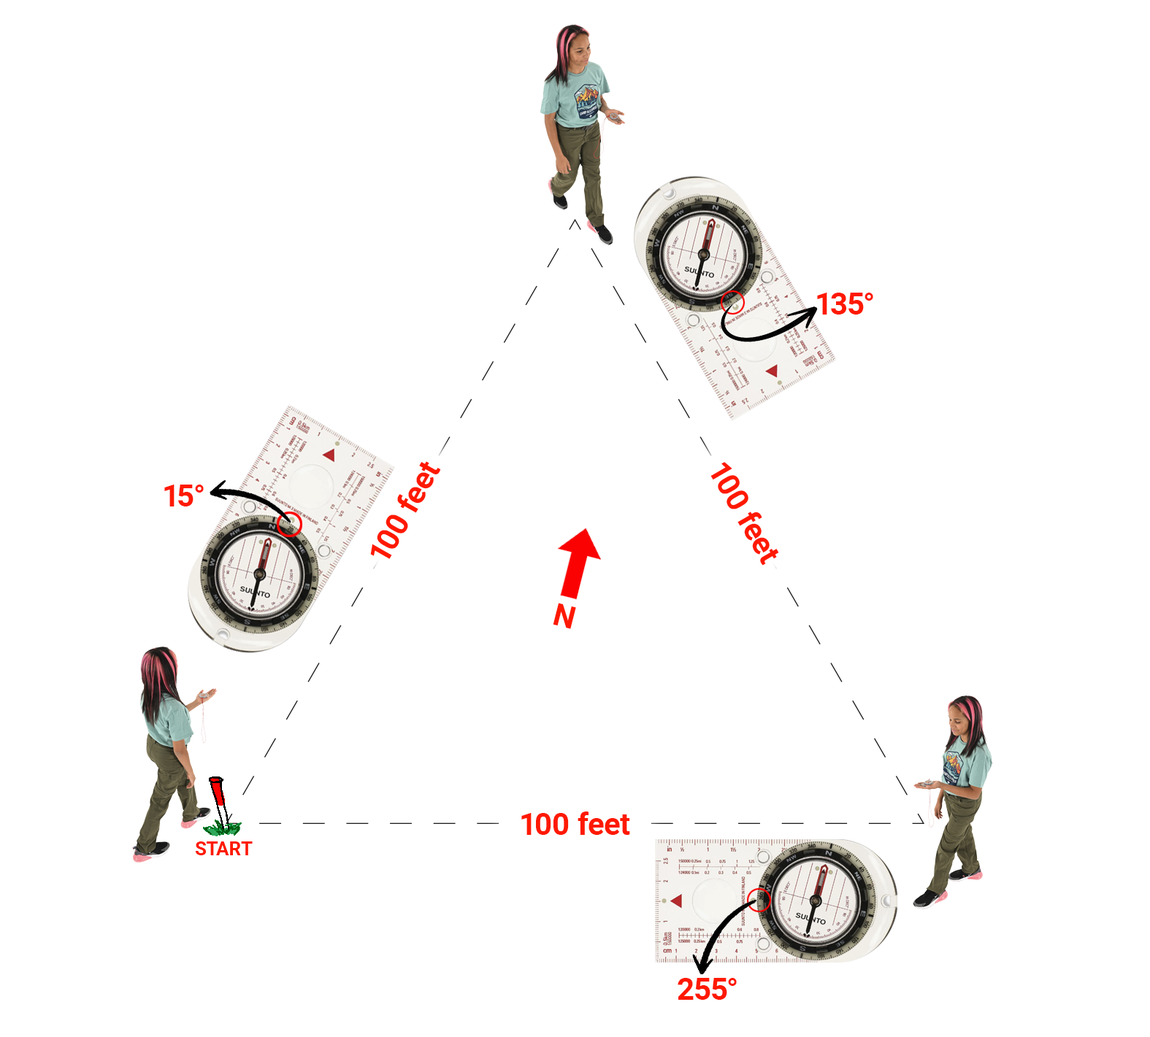
<style>
.page{position:relative;width:1150px;height:1037px;background:#ffffff}
.page>*{position:absolute;margin:0}
.t1{font:30.8px "Roboto-Bold";color:#ff1900}
.t2{font:18.8px "Roboto-Bold";color:#ff1900}
</style>
<div class="page">
<p class="t1" style="left:817px;top:293px;width:56px;height:22px">135°</p>
<p class="t1" style="left:370px;top:461px;width:71px;height:98px;rotate:-60deg">100 feet</p>
<p class="t1" style="left:710px;top:462px;width:69px;height:104px;rotate:60deg">100 feet</p>
<p class="t1" style="left:164px;top:485px;width:40px;height:22px">15°</p>
<p class="t1" style="left:553px;top:603px;width:23px;height:26px;rotate:14deg">N</p>
<p class="t1" style="left:521px;top:812px;width:109px;height:23px">100 feet</p>
<p class="t2" style="left:195px;top:842px;width:58px;height:13px">START</p>
<p class="t1" style="left:677px;top:978px;width:59px;height:22px">255°</p>
</div>
